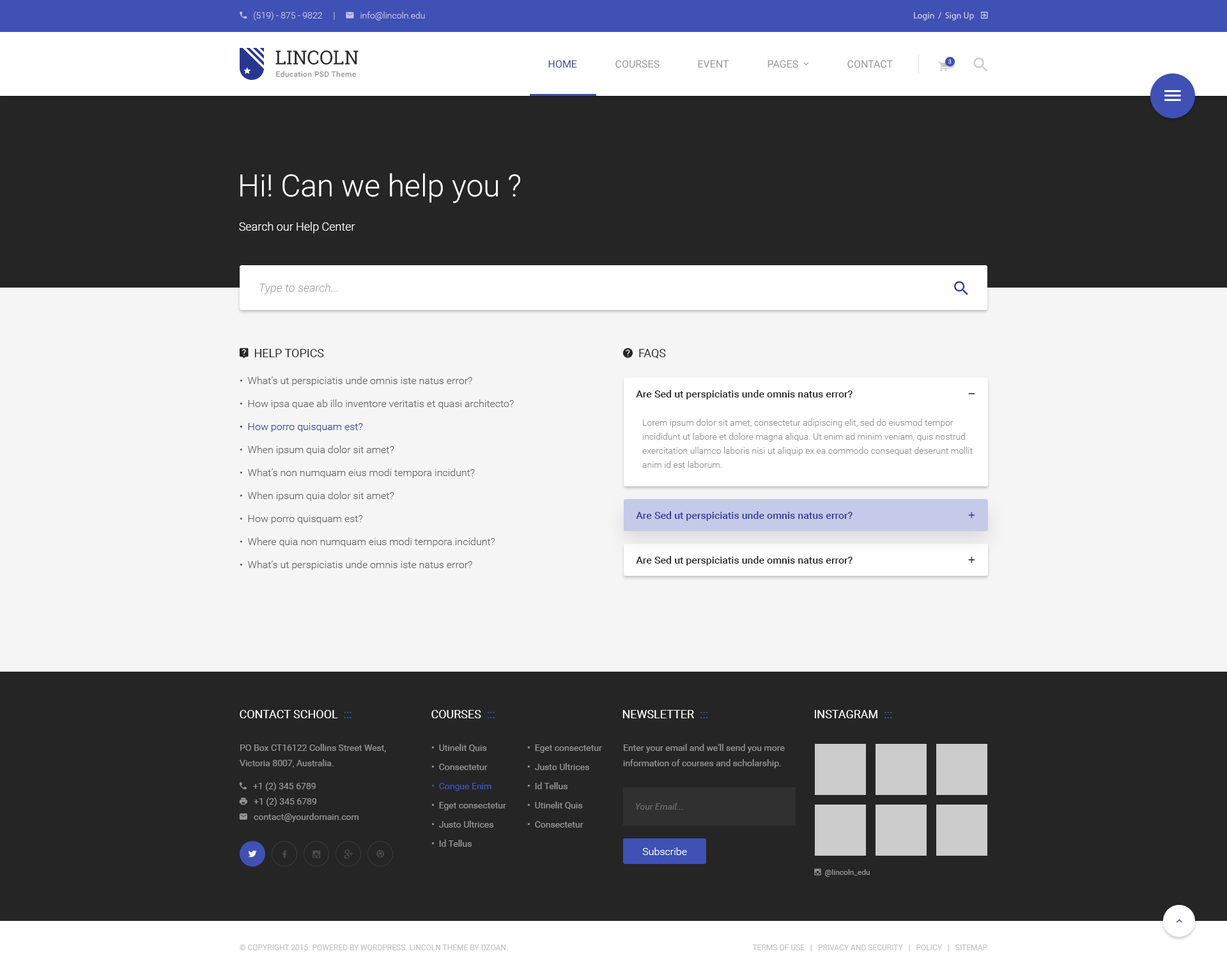
<style>
.page{position:relative;width:1227px;height:972px;background:#252525}
.page>*{position:absolute;margin:0}
.t1{font:19.2px "RobotoSlab-Regular";color:#252525;text-transform:uppercase}
.t2{font:10.2px "Roboto-Regular";color:#303f9f;text-transform:uppercase}
.t3{font:10.2px "Roboto-Regular";color:#959595;text-transform:uppercase}
.t4{font:5.8px "Roboto-Regular";text-transform:uppercase}
.t5{font:7.7px "Roboto-Medium";letter-spacing:0.03em;color:#959595}
.t6{font:30.7px "Roboto-Light";color:#ffffff}
.t7{font:11.5px "Roboto-Light";color:#ffffff}
.t8{font:11.5px "Roboto-LightItalic";color:#959595}
.t9{font:10.2px/23px "Roboto-Light";color:#636363}
.t10{font:10.2px/23px "Roboto-Light";color:#303f9f}
.t11{font:10.2px "Roboto-Medium";color:#252525}
.t12{font:8.9px/14.1px "Roboto-Light";color:#959595}
.t13{font:10.2px "Roboto-Medium";color:#303f9f}
.t14{font:11.5px "Roboto-Regular";color:#ffffff;text-transform:uppercase}
.t15{font:11.5px "Roboto-Regular";color:#3f51b5;text-transform:uppercase}
.t16{font:8.9px/19.2px "Roboto-Regular";color:#959595}
.t17{font:8.9px/19.2px "Roboto-Regular";color:#3f51b5}
.t18{font:8.9px/15.3px "Roboto-Regular";color:#959595}
.t19{font:8.9px "Roboto-Italic";color:#6c6c6c}
.t20{font:10.2px "Roboto-Light";color:#ffffff}
.t21{font:7.7px "Roboto-Regular";color:#c2c2c2;text-transform:uppercase}
</style>
<div class="page">
<p class="t1" style="left:275px;top:50px;width:83px;height:15px">Lincoln</p>
<p class="t2" style="left:548px;top:60px;width:29px;height:8px">Home</p>
<p class="t3" style="left:615px;top:60px;width:44px;height:8px">Courses</p>
<p class="t3" style="left:698px;top:60px;width:31px;height:8px">Event</p>
<p class="t3" style="left:847px;top:60px;width:46px;height:8px">Contact</p>
<p class="t4" style="left:948px;top:59px;width:3px;height:5px">3</p>
<p class="t5" style="left:276px;top:71px;width:80px;height:6px">Education PSD Theme</p>
<p class="t6" style="left:240px;top:173px;width:280px;height:30px">Hi! Can we help you ?</p>
<p class="t7" style="left:239px;top:222px;width:116px;height:11px">Search our Help Center</p>
<p class="t8" style="left:259px;top:283px;width:79px;height:12px">Type to search...</p>
<p class="t9" style="left:240px;top:376px;width:274px;height:194px">•  What’s ut perspiciatis unde omnis iste natus error?<br>•  How ipsa quae ab illo inventore veritatis et quasi architecto?<br><span class="t10">•  How porro quisquam est?<br></span>•  When ipsum quia dolor sit amet?<br>•  What’s non numquam eius modi tempora incidunt?<br>•  When ipsum quia dolor sit amet?<br>•  How porro quisquam est?<br>•  Where quia non numquam eius modi tempora incidunt?<br>•  What’s ut perspiciatis unde omnis iste natus error?</p>
<p class="t11" style="left:636px;top:390px;width:216px;height:9px">Are Sed ut perspiciatis unde omnis natus error?</p>
<p class="t12" style="left:642px;top:419px;width:331px;height:49px">Lorem ipsum dolor sit amet, consectetur adipiscing elit, sed do eiusmod tempor incididunt ut labore et dolore magna aliqua. Ut enim ad minim veniam, quis nostrud exercitation ullamco laboris nisi ut aliquip ex ea commodo consequat deserunt mollit anim id est laborum.</p>
<p class="t13" style="left:636px;top:511px;width:216px;height:10px">Are Sed ut perspiciatis unde omnis natus error?</p>
<p class="t11" style="left:636px;top:556px;width:216px;height:10px">Are Sed ut perspiciatis unde omnis natus error?</p>
<p class="t14" style="left:240px;top:710px;width:111px;height:8px">Contact School  <span class="t15">:::</span></p>
<p class="t14" style="left:431px;top:710px;width:64px;height:8px">Courses  <span class="t15">:::</span></p>
<p class="t14" style="left:622px;top:710px;width:85px;height:8px">Newsletter  <span class="t15">:::</span></p>
<p class="t14" style="left:815px;top:710px;width:77px;height:8px">Instagram  <span class="t15">:::</span></p>
<p class="t16" style="left:431px;top:744px;width:75px;height:103px">•  Utinelit Quis<br>•  Consectetur<br><span class="t17">•  Congue Enim<br></span>•  Eget consectetur<br>•  Justo Ultrices<br>•  Id Tellus</p>
<p class="t16" style="left:527px;top:744px;width:75px;height:84px">•  Eget consectetur<br>•  Justo Ultrices<br>•  Id Tellus<br>•  Utinelit Quis<br>•  Consectetur</p>
<p class="t18" style="left:623px;top:744px;width:162px;height:24px">Enter your email and we'll send you more information of courses and scholarship.</p>
<p class="t19" style="left:635px;top:803px;width:48px;height:7px">Your Email...</p>
<p class="t20" style="left:642px;top:847px;width:45px;height:8px">Subscribe</p>
<p class="t21" style="left:240px;top:944px;width:268px;height:6px">© Copyright 2015. Powered by WordPress. Lincoln Theme by DZOAN.</p>
<p class="t21" style="left:752px;top:944px;width:235px;height:7px">Terms of Use   |   Privacy and Security   |   Policy   |   Sitemap</p>
</div>
